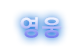
<style>
.page{position:relative;width:82px;height:51px;background:#ffffff}
.page>*{position:absolute;margin:0}
.t1{font:22px "MalgunGothicBold"}
</style>
<div class="page">
<p class="t1" style="left:20px;top:17px;width:42px;height:21px">영웅</p>
</div>
